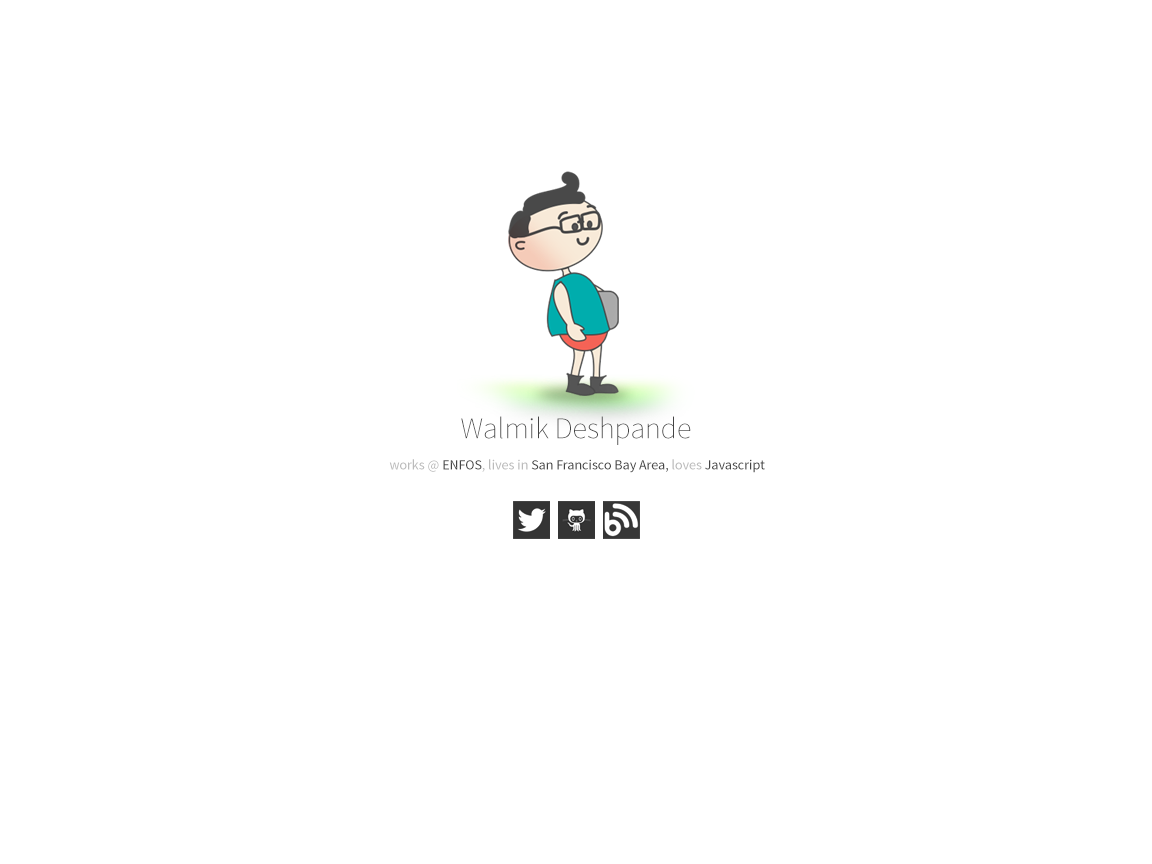
<style>
.page{position:relative;width:1152px;height:864px;background:#ffffff}
.page>*{position:absolute;margin:0}
.t1{font:30px "SourceSansPro-ExtraLight";color:#444444}
.t2{font:14px "SourceSansPro-Regular";color:#444444}
.t3{font:14px "SourceSansPro-Regular";color:#bbbbbb}
</style>
<div class="page">
<p class="t1" style="left:461px;top:416px;width:230px;height:29px">Walmik Deshpande</p>
<p class="t2" style="left:389px;top:459px;width:376px;height:14px"><span class="t3">works @ </span>ENFOS<span class="t3">, lives in </span>San Francisco Bay Area, <span class="t3">loves </span>Javascript</p>
</div>
